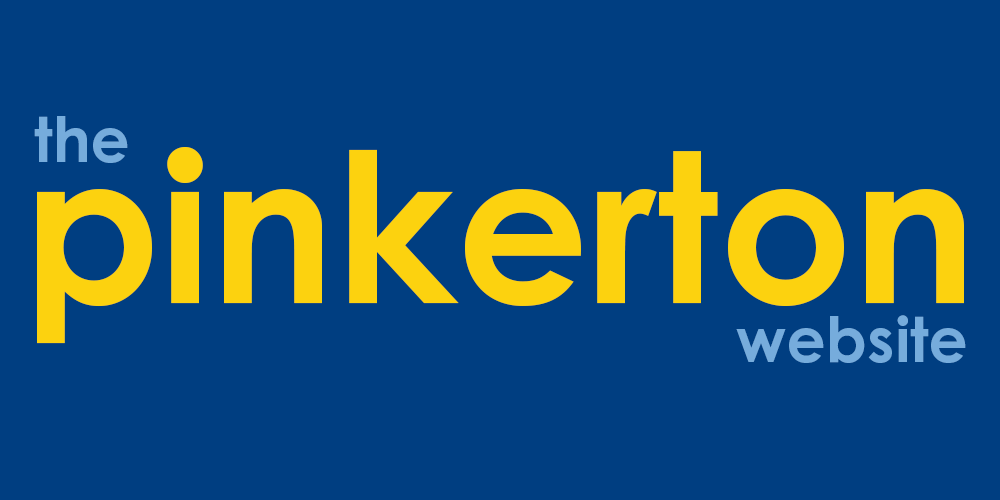
<style>
.page{position:relative;width:1000px;height:500px;background:#003e81}
.page>*{position:absolute;margin:0}
.t1{font:62.5px "CenturyGothicPro-Bold";color:#76acdc}
.t2{font:208.3px "CenturyGothicPro-Bold";color:#fcd20f}
</style>
<div class="page">
<p class="t1" style="left:34px;top:116px;width:94px;height:47px">the</p>
<p class="t2" style="left:37px;top:147px;width:927px;height:197px">pinkerton</p>
<p class="t1" style="left:736px;top:315px;width:230px;height:48px">website</p>
</div>
